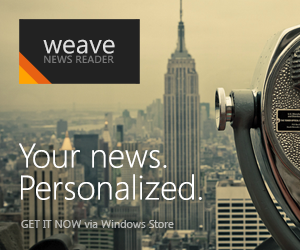
<style>
.page{position:relative;width:300px;height:250px}
.page>*{position:absolute;margin:0}
.t1{font:10.4px/9.7px "SegoeUI-Semibold";color:#767676}
.t2{font:26.3px/9.7px "SegoeUI";color:#dfdfdf}
.t3{font:34px/32px "SegoeUI-Light";color:#ffffff}
.t4{font:11px "SegoeUI";color:#b6b7b5}
</style>
<div class="page">
<p class="t1" style="left:43px;top:39px;width:72px;height:24px"><span class="t2">weave<br></span>NEWS READER</p>
<p class="t3" style="left:19px;top:143px;width:183px;height:57px">Your news.<br>Personalized.</p>
<p class="t4" style="left:21px;top:220px;width:153px;height:8px">GET IT NOW via Windows Store</p>
</div>
